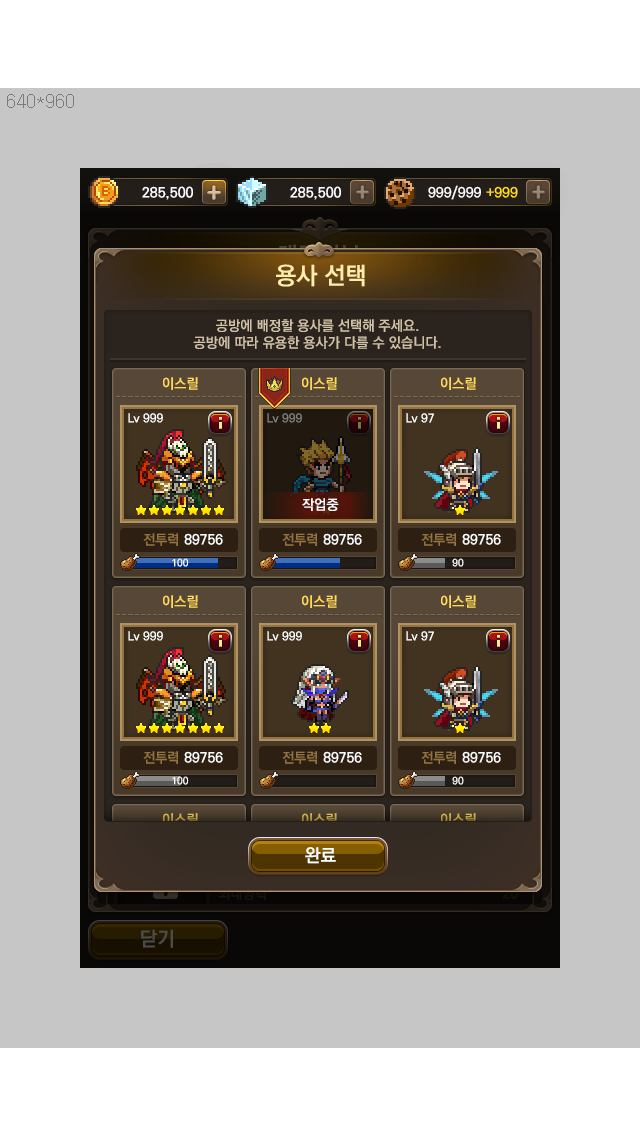
<style>
.page{position:relative;width:640px;height:1136px;background:#c6c6c6}
.page>*{position:absolute;margin:0}
.t1{font:24px "KoPubDotumBold";color:#ffedab}
.t2{font:14px "KoPubDotumBold";color:#d0c0a6}
.t3{font:14px "KoPubDotumBold";color:#ffda5a}
.t4{font:12px "KoPubDotumBold";color:#ffffff}
.t5{font:12px "KoPubDotumBold";color:#7f7f7f}
.t6{font:14px "KoPubDotumBold";color:#ffffff}
.t7{font:14px "KoPubDotumBold";color:#937441}
.t8{font:10px "KoPubDotumBold";color:#ffffff}
.t9{font:18px "KoPubDotumBold";color:#ffffff}
</style>
<div class="page">
<p class="t1" style="left:276px;top:264px;width:89px;height:23px">용사 선택</p>
<p class="t2" style="left:193px;top:319px;width:248px;height:30px;text-align:center">공방에 배정할 용사를 선택해 주세요.<br>공방에 따라 유용한 용사가 다를 수 있습니다.</p>
<p class="t3" style="left:163px;top:377px;width:35px;height:13px">이스릴</p>
<p class="t3" style="left:302px;top:377px;width:35px;height:13px">이스릴</p>
<p class="t3" style="left:441px;top:377px;width:35px;height:13px">이스릴</p>
<p class="t4" style="left:128px;top:413px;width:35px;height:10px">Lv 999</p>
<p class="t5" style="left:267px;top:413px;width:35px;height:10px">Lv 999</p>
<p class="t4" style="left:406px;top:413px;width:28px;height:10px">Lv 97</p>
<p class="t6" style="left:302px;top:498px;width:37px;height:13px">작업중</p>
<p class="t7" style="left:143px;top:533px;width:35px;height:13px">전투력</p>
<p class="t6" style="left:184px;top:533px;width:39px;height:12px">89756</p>
<p class="t7" style="left:282px;top:533px;width:35px;height:13px">전투력</p>
<p class="t6" style="left:323px;top:533px;width:39px;height:12px">89756</p>
<p class="t7" style="left:421px;top:533px;width:35px;height:13px">전투력</p>
<p class="t6" style="left:462px;top:533px;width:39px;height:12px">89756</p>
<p class="t8" style="left:172px;top:558px;width:17px;height:9px">100</p>
<p class="t8" style="left:452px;top:558px;width:12px;height:9px">90</p>
<p class="t9" style="left:305px;top:847px;width:31px;height:17px">완료</p>
</div>
